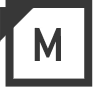
<style>
.page{position:relative;width:96px;height:87px;background:#ffffff}
.page>*{position:absolute;margin:0}
.t1{font:47.6px "Montserrat-Bold";letter-spacing:0.08em;color:#373737;scale:0.7 1}
</style>
<div class="page">
<p class="t1" style="left:34px;top:28px;width:27px;height:33px">M</p>
</div>
